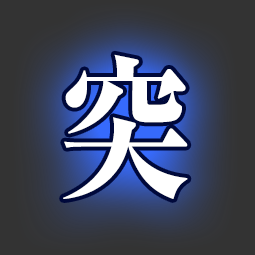
<style>
.page{position:relative;width:255px;height:255px;background:#333333}
.page>*{position:absolute;margin:0}
.t1{font:156px "RyuminPro-ExBold";letter-spacing:-0.08em;color:#ffffff;scale:0.88 1}
</style>
<div class="page">
<p class="t1" style="left:63px;top:54px;width:125px;height:145px">突</p>
</div>
